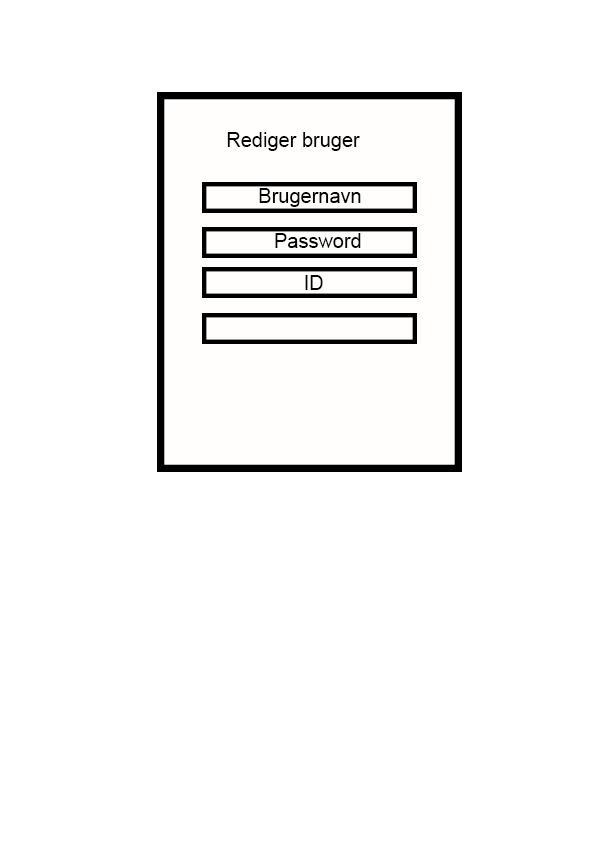
<style>
.page{position:relative;width:595px;height:842px;background:#ffffff}
.page>*{position:absolute;margin:0}
.t1{font:20px "ArialMT";color:#040404}
</style>
<div class="page">
<p class="t1" style="left:227px;top:132px;width:133px;height:19px">Rediger bruger</p>
<p class="t1" style="left:259px;top:188px;width:102px;height:19px">Brugernavn</p>
<p class="t1" style="left:275px;top:233px;width:86px;height:15px">Password</p>
<p class="t1" style="left:305px;top:275px;width:18px;height:15px">ID</p>
</div>
